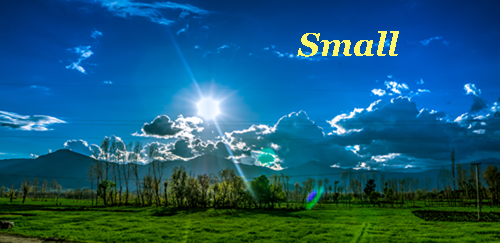
<style>
.page{position:relative;width:500px;height:243px}
.page>*{position:absolute;margin:0}
.t1{font:33.3px "Georgia-BoldItalic";color:#fff568}
</style>
<div class="page">
<p class="t1" style="left:297px;top:31px;width:102px;height:26px">Small</p>
</div>
